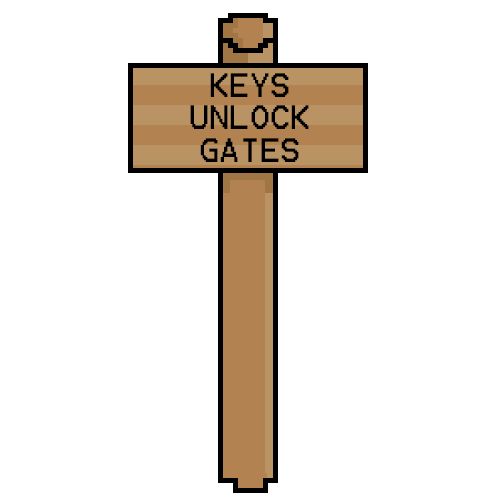
<style>
.page{position:relative;width:500px;height:500px;background:#ffffff}
.page>*{position:absolute;margin:0}
.t1{font:27px "Terminal";color:#000000}
</style>
<div class="page">
<p class="t1" style="left:190px;top:73px;width:119px;height:89px;text-align:center">KEYS<br>UNLOCK<br>GATES</p>
</div>
